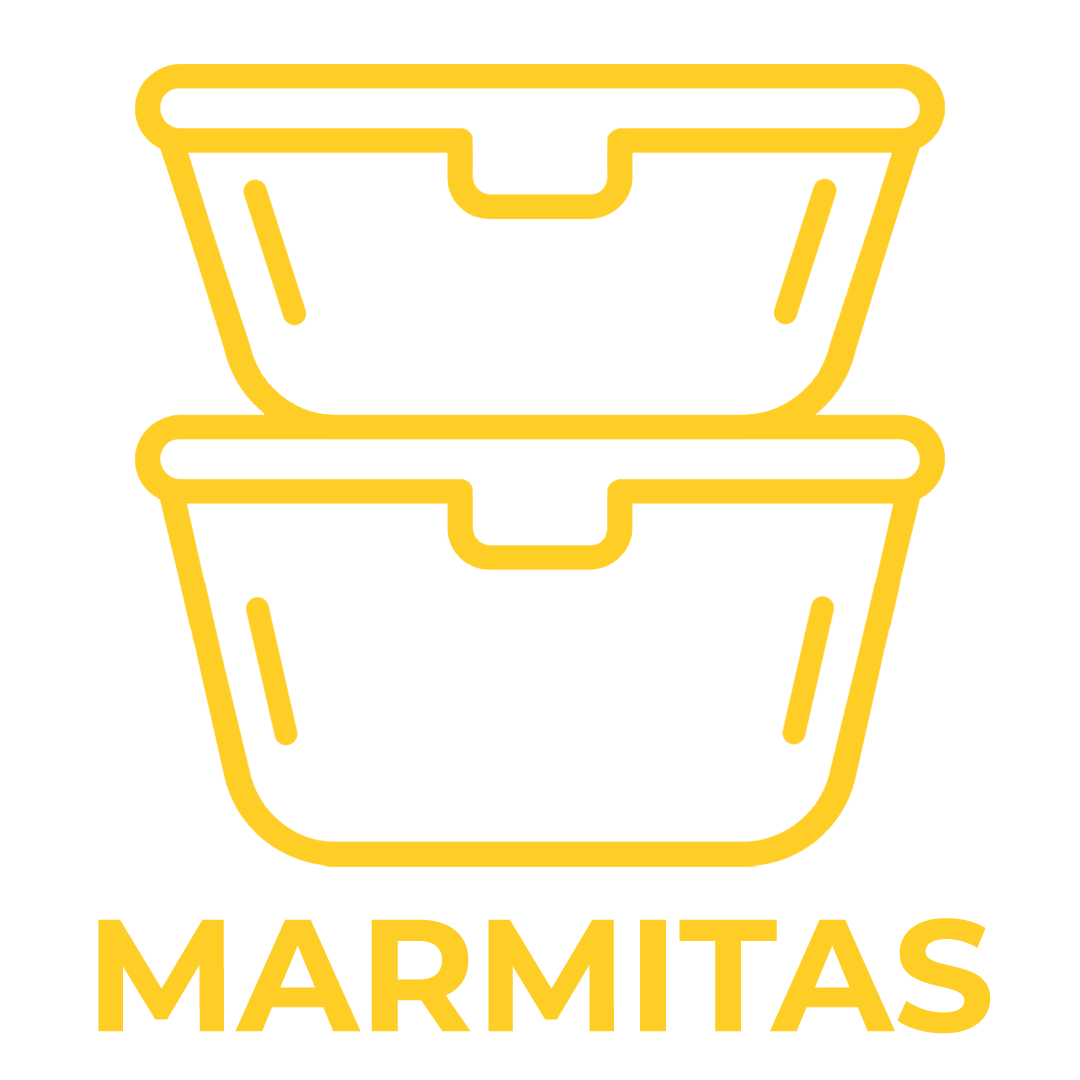
<style>
.page{position:relative;width:1080px;height:1080px;background:#ffffff}
.page>*{position:absolute;margin:0}
.t1{font:158.8px "Montserrat-Bold";color:#fece26;text-transform:uppercase}
</style>
<div class="page">
<p class="t1" style="left:98px;top:918px;width:893px;height:116px">Marmitas</p>
</div>
